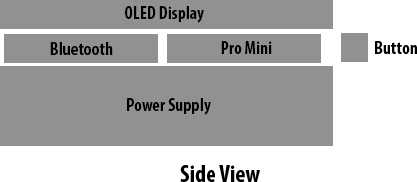
<style>
.page{position:relative;width:417px;height:182px;background:#919191}
.page>*{position:absolute;margin:0}
.t1{font:18px "MyriadPro-BoldCond";color:#000000}
.t2{font:24px "MyriadPro-BoldCond";color:#000000}
</style>
<div class="page">
<p class="t1" style="left:125px;top:6px;width:79px;height:17px">OLED Display</p>
<p class="t1" style="left:221px;top:41px;width:51px;height:13px">Pro Mini</p>
<p class="t1" style="left:375px;top:41px;width:42px;height:13px">Button</p>
<p class="t1" style="left:50px;top:42px;width:63px;height:13px">Bluetooth</p>
<p class="t1" style="left:127px;top:98px;width:84px;height:17px">Power Supply</p>
<p class="t2" style="left:180px;top:165px;width:80px;height:17px">Side View</p>
</div>
